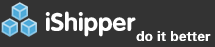
<style>
.page{position:relative;width:215px;height:47px;background:#333333}
.page>*{position:absolute;margin:0}
.t1{font:25.4px "FZY4JW--GB1-0";color:#ffffff}
.t2{font:14px "FZDHTJW--GB1-0";color:#ffffff}
</style>
<div class="page">
<p class="t1" style="left:45px;top:11px;width:91px;height:26px">iShipper</p>
<p class="t2" style="left:136px;top:31px;width:75px;height:10px">do it better</p>
</div>
